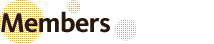
<style>
.page{position:relative;width:214px;height:44px;background:#ffffff}
.page>*{position:absolute;margin:0}
.t1{font:28px "KievitPro-Bold";letter-spacing:-0.025em;color:#29170a}
</style>
<div class="page">
<p class="t1" style="left:1px;top:11px;width:109px;height:22px">Members</p>
</div>
